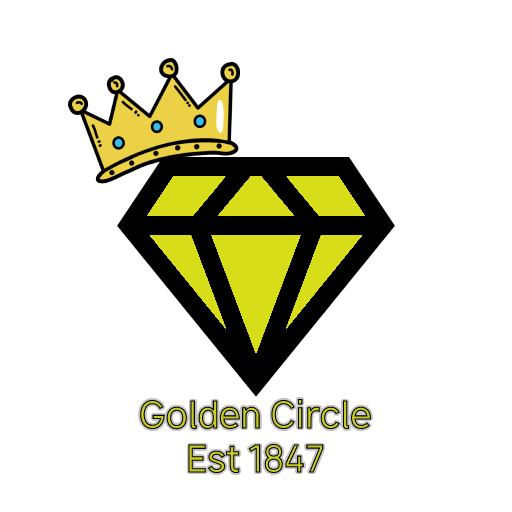
<style>
.page{position:relative;width:512px;height:512px;background:#ffffff}
.page>*{position:absolute;margin:0}
.t1{font:36px "Vladivostok-Regular"}
</style>
<div class="page">
<p class="t1" style="left:139px;top:398px;width:233px;height:76px;text-align:center">Golden Circle<br>Est 1847</p>
</div>
